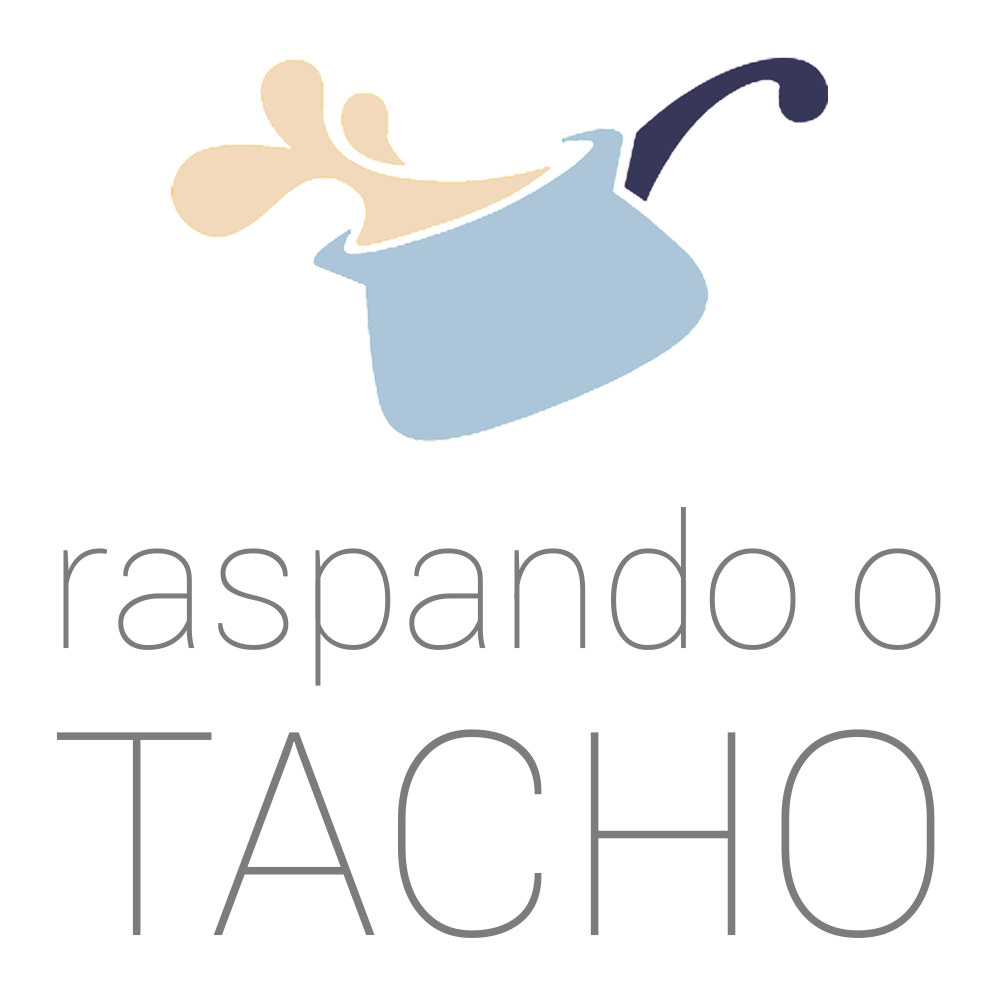
<style>
.page{position:relative;width:1000px;height:1000px;background:#ffffff}
.page>*{position:absolute;margin:0}
.t1{font:185.1px "Roboto-Thin";color:#7c7c7c}
.t2{font:285.4px "Roboto-Thin";color:#7c7c7c}
</style>
<div class="page">
<p class="t1" style="left:63px;top:507px;width:878px;height:179px">raspando o</p>
<p class="t2" style="left:56px;top:729px;width:879px;height:209px">TACHO</p>
</div>
